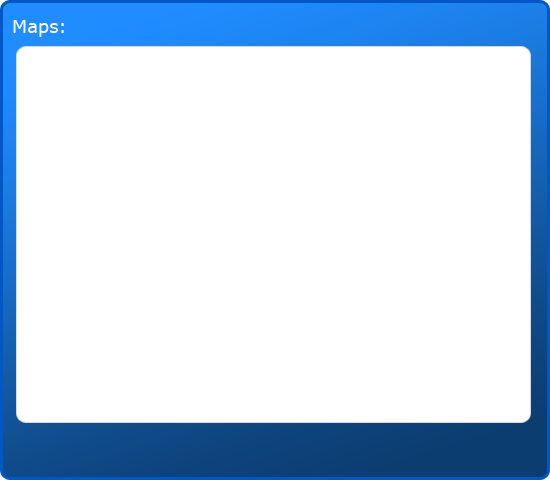
<style>
.page{position:relative;width:550px;height:480px;background:#ffffff}
.page>*{position:absolute;margin:0}
.t1{font:18px "Verdana";color:#ffffff}
</style>
<div class="page">
<p class="t1" style="left:13px;top:20px;width:51px;height:17px">Maps:</p>
</div>
